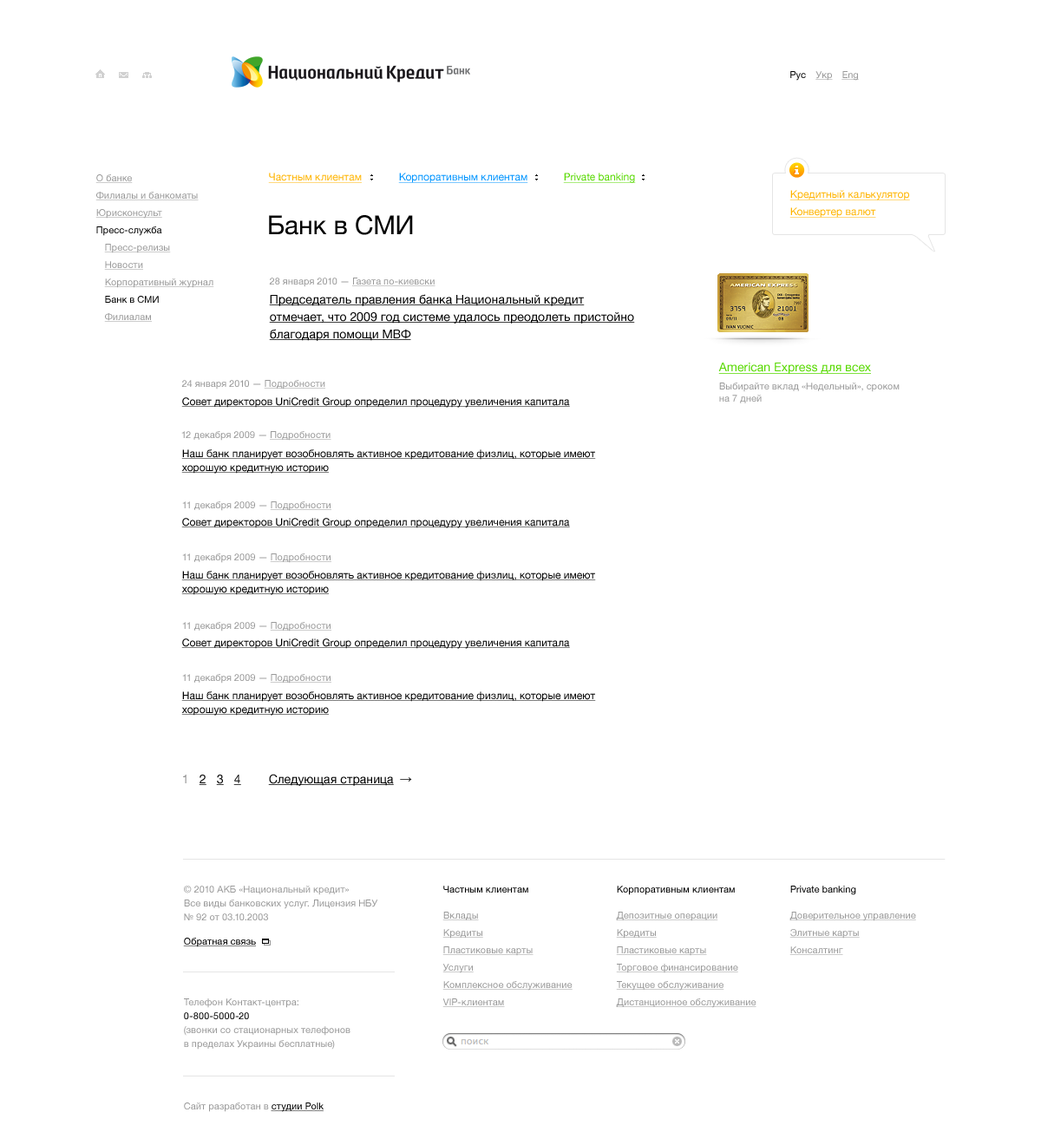
<style>
.page{position:relative;width:1041px;height:1145px;background:#ffffff}
.page>*{position:absolute;margin:0}
.t1{font:9.5px "HelveticaNeue";color:#000000}
.t2{font:9.5px "HelveticaNeue";color:#999999;text-decoration:underline}
.t3{font:10.4px "HelveticaNeue";color:#ffb400;text-decoration:underline}
.t4{font:10.4px "HelveticaNeue";color:#0094ff;text-decoration:underline}
.t5{font:10.4px "HelveticaNeue";color:#57d900;text-decoration:underline}
.t6{font:26px "HelveticaNeue";color:#000000}
.t7{font:9.5px "HelveticaNeue";color:#999999}
.t8{font:12.1px/17.4px "HelveticaNeue";color:#000000;text-decoration:underline}
.t9{font:12.1px "HelveticaNeue";color:#57d900;text-decoration:underline}
.t10{font:10.4px "HelveticaNeue";color:#000000;text-decoration:underline}
.t11{font:10.4px/13.9px "HelveticaNeue";color:#000000;text-decoration:underline}
.t12{font:12.1px "HelveticaNeue";color:#000000;text-decoration:underline}
.t13{font:12.1px "HelveticaNeue";color:#999999}
.t14{font:12.1px "HelveticaNeue";text-decoration:underline}
.t15{font:12.1px "ArialMT"}
.t16{font:9.5px/13.9px "HelveticaNeue";color:#999999}
.t17{font:9.5px "HelveticaNeue";color:#000000;text-decoration:underline}
.t18{font:9.5px/13.9px "HelveticaNeue";color:#010101}
</style>
<div class="page">
<p class="t1" style="left:790px;top:71px;width:16px;height:10px">Рус</p>
<p class="t2" style="left:816px;top:71px;width:17px;height:10px">Укр</p>
<p class="t2" style="left:842px;top:71px;width:17px;height:10px">Eng</p>
<p class="t3" style="left:268px;top:173px;width:94px;height:10px">Частным клиентам</p>
<p class="t4" style="left:398px;top:173px;width:130px;height:10px">Корпоративным клиентам</p>
<p class="t5" style="left:563px;top:173px;width:73px;height:10px">Private banking</p>
<p class="t2" style="left:95px;top:174px;width:38px;height:9px">О банке</p>
<p class="t2" style="left:95px;top:192px;width:104px;height:8px">Филиалы и банкоматы</p>
<p class="t3" style="left:790px;top:190px;width:120px;height:10px">Кредитный калькулятор</p>
<p class="t2" style="left:95px;top:209px;width:67px;height:10px">Юрисконсульт</p>
<p class="t3" style="left:790px;top:207px;width:86px;height:11px">Конвертер валют</p>
<p class="t6" style="left:269px;top:215px;width:144px;height:20px">Банк в СМИ</p>
<p class="t1" style="left:96px;top:226px;width:66px;height:10px">Пресс-служба</p>
<p class="t2" style="left:104px;top:244px;width:67px;height:9px">Пресс-релизы</p>
<p class="t2" style="left:104px;top:261px;width:39px;height:9px">Новости</p>
<p class="t2" style="left:104px;top:279px;width:110px;height:9px">Корпоративный журнал</p>
<p class="t2" style="left:269px;top:278px;width:167px;height:9px"><span class="t7">28 января 2010 — </span>Газета по-киевски</p>
<p class="t1" style="left:105px;top:296px;width:54px;height:7px">Банк в СМИ</p>
<p class="t8" style="left:269px;top:294px;width:366px;height:47px">Председатель правления банка Национальный кредит<br>отмечает, что 2009 год системе удалось преодолеть пристойно<br>благодаря помощи МВФ</p>
<p class="t2" style="left:104px;top:313px;width:48px;height:9px">Филиалам</p>
<p class="t9" style="left:718px;top:363px;width:153px;height:11px">American Express для всех</p>
<p class="t7" style="left:181px;top:380px;width:144px;height:10px">24 января 2010 — <span class="t2">Подробности</span></p>
<p class="t7" style="left:719px;top:383px;width:181px;height:20px">Выбирайте вклад «Недельный», сроком<br>на 7 дней</p>
<p class="t10" style="left:181px;top:397px;width:389px;height:11px">Совет директоров UniCredit Group определил процедуру увеличения капитала</p>
<p class="t7" style="left:181px;top:431px;width:150px;height:10px">12 декабря 2009 — <span class="t2">Подробности</span></p>
<p class="t11" style="left:181px;top:449px;width:415px;height:25px">Наш банк планирует возобновлять активное кредитование физлиц, которые имеют<br>хорошую кредитную историю</p>
<p class="t7" style="left:182px;top:501px;width:149px;height:10px">11 декабря 2009 — <span class="t2">Подробности</span></p>
<p class="t10" style="left:181px;top:518px;width:389px;height:10px">Совет директоров UniCredit Group определил процедуру увеличения капитала</p>
<p class="t7" style="left:182px;top:554px;width:149px;height:9px">11 декабря 2009 — <span class="t2">Подробности</span></p>
<p class="t11" style="left:181px;top:571px;width:415px;height:24px">Наш банк планирует возобновлять активное кредитование физлиц, которые имеют<br>хорошую кредитную историю</p>
<p class="t7" style="left:182px;top:622px;width:149px;height:10px">11 декабря 2009 — <span class="t2">Подробности</span></p>
<p class="t10" style="left:181px;top:639px;width:389px;height:10px">Совет директоров UniCredit Group определил процедуру увеличения капитала</p>
<p class="t7" style="left:182px;top:674px;width:149px;height:10px">11 декабря 2009 — <span class="t2">Подробности</span></p>
<p class="t11" style="left:181px;top:692px;width:415px;height:24px">Наш банк планирует возобновлять активное кредитование физлиц, которые имеют<br>хорошую кредитную историю</p>
<p class="t12" style="left:268px;top:774px;width:126px;height:12px">Следующая страница</p>
<p class="t13" style="left:183px;top:775px;width:4px;height:8px">1</p>
<p class="t12" style="left:199px;top:775px;width:7px;height:10px">2</p>
<p class="t12" style="left:216px;top:775px;width:8px;height:10px">3</p>
<p class="t14" style="left:233px;top:775px;width:8px;height:10px">4</p>
<p class="t15" style="left:400px;top:777px;width:12px;height:5px">→</p>
<p class="t16" style="left:184px;top:886px;width:194px;height:35px">© 2010 АКБ «Национальный кредит»<br>Все виды банковских услуг. Лицензия НБУ<br>№ 92 от 03.10.2003</p>
<p class="t1" style="left:443px;top:886px;width:85px;height:7px">Частным клиентам</p>
<p class="t1" style="left:617px;top:886px;width:118px;height:9px">Корпоративным клиентам</p>
<p class="t1" style="left:790px;top:886px;width:66px;height:9px">Private banking</p>
<p class="t2" style="left:442px;top:912px;width:37px;height:9px">Вклады</p>
<p class="t2" style="left:616px;top:912px;width:102px;height:9px">Депозитные операции</p>
<p class="t2" style="left:790px;top:912px;width:126px;height:9px">Доверительное управление</p>
<p class="t2" style="left:442px;top:929px;width:41px;height:10px">Кредиты</p>
<p class="t2" style="left:616px;top:929px;width:41px;height:10px">Кредиты</p>
<p class="t2" style="left:790px;top:929px;width:70px;height:10px">Элитные карты</p>
<p class="t17" style="left:183px;top:938px;width:73px;height:9px">Обратная связь</p>
<p class="t2" style="left:442px;top:947px;width:92px;height:9px">Пластиковые карты</p>
<p class="t2" style="left:616px;top:947px;width:91px;height:9px">Пластиковые карты</p>
<p class="t2" style="left:790px;top:947px;width:53px;height:8px">Консалтинг</p>
<p class="t2" style="left:442px;top:964px;width:32px;height:9px">Услуги</p>
<p class="t2" style="left:616px;top:964px;width:122px;height:9px">Торговое финансирование</p>
<p class="t2" style="left:442px;top:981px;width:131px;height:10px">Комплексное обслуживание</p>
<p class="t2" style="left:616px;top:981px;width:108px;height:10px">Текущее обслуживание</p>
<p class="t16" style="left:184px;top:999px;width:167px;height:51px">Телефон Контакт-центра:<br><span class="t18">0-800-5000-20<br></span>(звонки со стационарных телефонов<br>в пределах Украины бесплатные)</p>
<p class="t2" style="left:442px;top:999px;width:63px;height:8px">VIP-клиентам</p>
<p class="t2" style="left:616px;top:999px;width:141px;height:9px">Дистанционное обслуживание</p>
<p class="t7" style="left:184px;top:1103px;width:140px;height:9px">Сайт разработан в <span class="t17">студии Polk</span></p>
</div>
